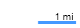
<style>
.page{position:relative;width:80px;height:28px;background:#ffffff}
.page>*{position:absolute;margin:0}
.t1{font:10px "ArialMT";color:#020202}
</style>
<div class="page">
<p class="t1" style="left:55px;top:13px;width:18px;height:7px">1 mi</p>
</div>
